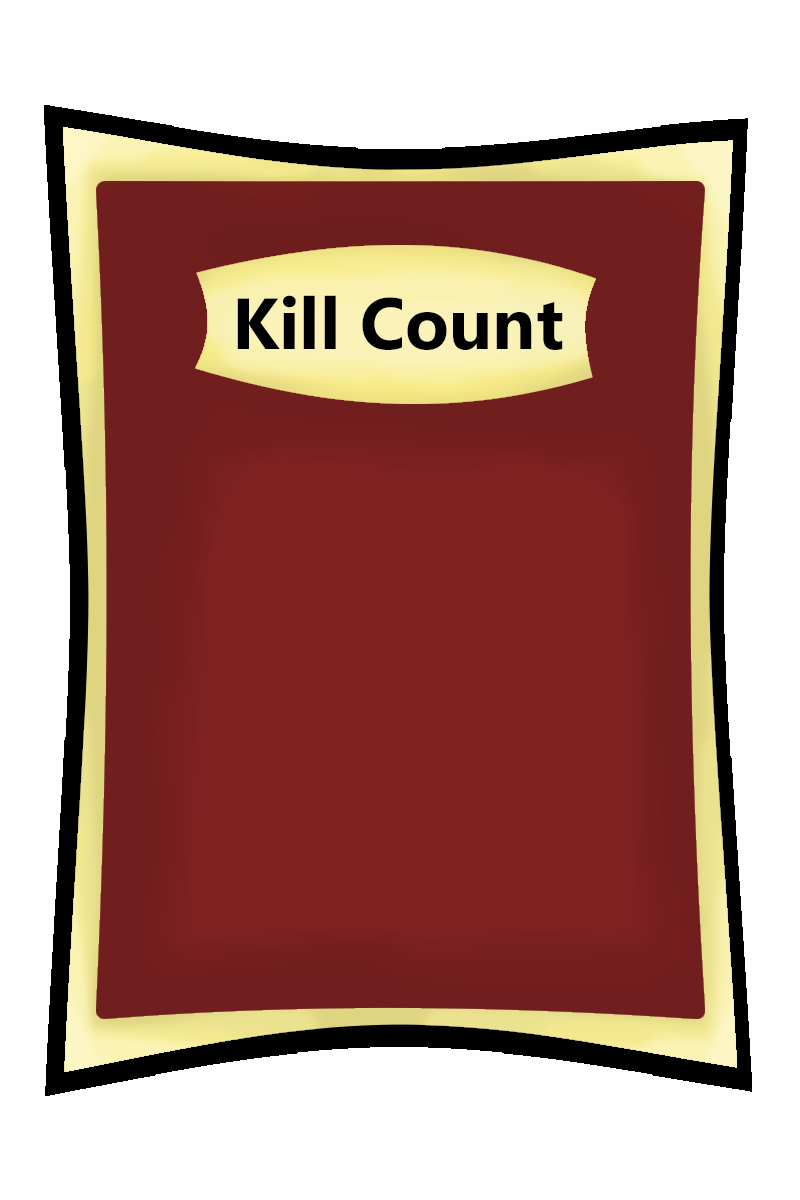
<style>
.page{position:relative;width:800px;height:1200px;background:#ffffff}
.page>*{position:absolute;margin:0}
.t1{font:72px "MicrosoftTaiLe-Bold";color:#000000}
</style>
<div class="page">
<p class="t1" style="left:237px;top:295px;width:326px;height:55px">Kill Count</p>
</div>
